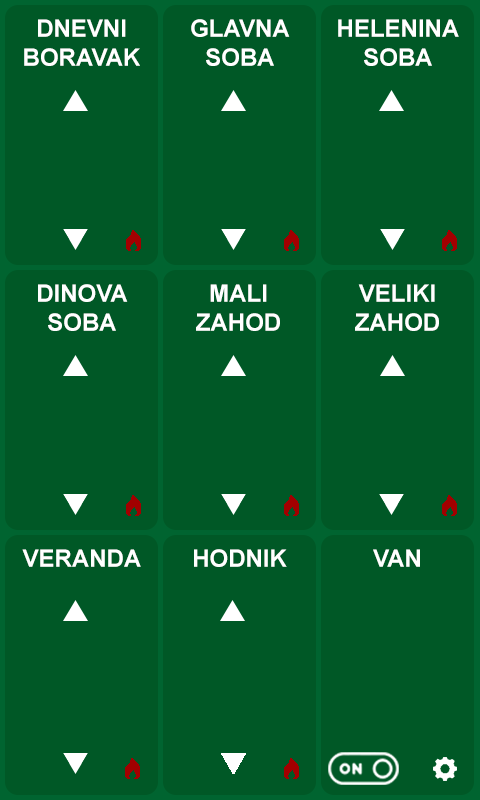
<style>
.page{position:relative;width:480px;height:800px;background:#005826}
.page>*{position:absolute;margin:0}
.t1{font:24px "Arial-BoldMT";color:#ffffff}
</style>
<div class="page">
<p class="t1" style="left:24px;top:19px;width:116px;height:47px;text-align:center">DNEVNI<br>BORAVAK</p>
<p class="t1" style="left:191px;top:19px;width:99px;height:47px;text-align:center">GLAVNA<br>SOBA</p>
<p class="t1" style="left:338px;top:19px;width:121px;height:47px;text-align:center">HELENINA<br>SOBA</p>
<p class="t1" style="left:38px;top:284px;width:90px;height:47px;text-align:center">DINOVA<br>SOBA</p>
<p class="t1" style="left:196px;top:284px;width:84px;height:47px;text-align:center">MALI<br>ZAHOD</p>
<p class="t1" style="left:355px;top:284px;width:84px;height:47px;text-align:center">VELIKI<br>ZAHOD</p>
<p class="t1" style="left:22px;top:549px;width:119px;height:18px">VERANDA</p>
<p class="t1" style="left:194px;top:549px;width:93px;height:18px">HODNIK</p>
<p class="t1" style="left:373px;top:549px;width:47px;height:18px">VAN</p>
</div>
